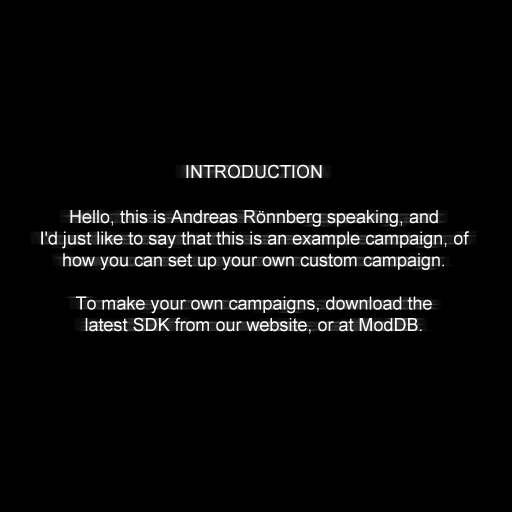
<style>
.page{position:relative;width:512px;height:512px;background:#000000}
.page>*{position:absolute;margin:0}
.t1{font:18px "ArialMT";color:#ffffff}
</style>
<div class="page">
<p class="t1" style="left:186px;top:164px;width:136px;height:15px">INTRODUCTION</p>
<p class="t1" style="left:41px;top:210px;width:428px;height:124px;text-align:center">Hello, this is Andreas Rönnberg speaking, and<br>I'd just like to say that this is an example campaign, of<br>how you can set up your own custom campaign.<br><br>To make your own campaigns, download the<br>latest SDK from our website, or at ModDB.</p>
</div>
